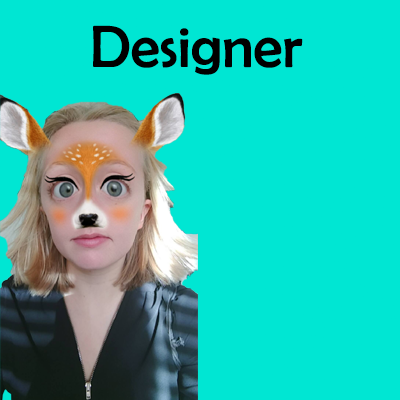
<style>
.page{position:relative;width:400px;height:400px;background:#00e6d3}
.page>*{position:absolute;margin:0}
.t1{font:60px "BerlinSansFB-Reg";color:#000000}
</style>
<div class="page">
<p class="t1" style="left:93px;top:25px;width:210px;height:50px">Designer</p>
</div>
